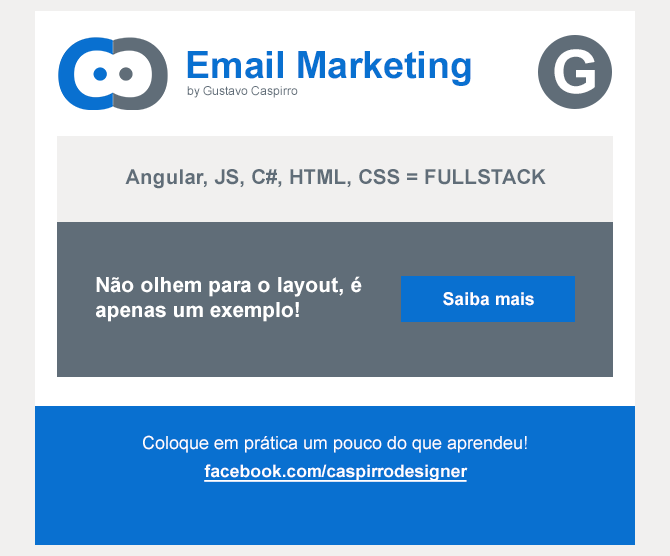
<style>
.page{position:relative;width:670px;height:556px;background:#ffffff}
.page>*{position:absolute;margin:0}
.t1{font:37.6px "Arial-BoldMT";color:#0970d0}
.t2{font:60px "Arial-BoldMT";color:#ffffff}
.t3{font:12px "ArialMT";color:#606d78}
.t4{font:20.5px "Arial-BoldMT";color:#606d78}
.t5{font:20.8px "Arial-BoldMT";color:#ffffff}
.t6{font:17.6px "Arial-BoldMT";color:#ffffff}
.t7{font:18px "ArialMT";color:#ffffff}
.t8{font:16.9px "Arial-BoldMT";color:#ffffff;text-decoration:underline}
</style>
<div class="page">
<p class="t1" style="left:187px;top:51px;width:284px;height:35px">Email Marketing</p>
<p class="t2" style="left:554px;top:49px;width:41px;height:45px">G</p>
<p class="t3" style="left:187px;top:86px;width:111px;height:12px">by Gustavo Caspirro</p>
<p class="t4" style="left:125px;top:169px;width:421px;height:20px">Angular, JS, C#, HTML, CSS = FULLSTACK</p>
<p class="t5" style="left:96px;top:276px;width:266px;height:46px">Não olhem para o layout, é<br>apenas um exemplo!</p>
<p class="t6" style="left:443px;top:292px;width:91px;height:14px">Saiba mais</p>
<p class="t7" style="left:143px;top:435px;width:384px;height:18px">Coloque em prática um pouco do que aprendeu!</p>
<p class="t8" style="left:204px;top:464px;width:264px;height:18px">facebook.com/caspirrodesigner</p>
</div>
